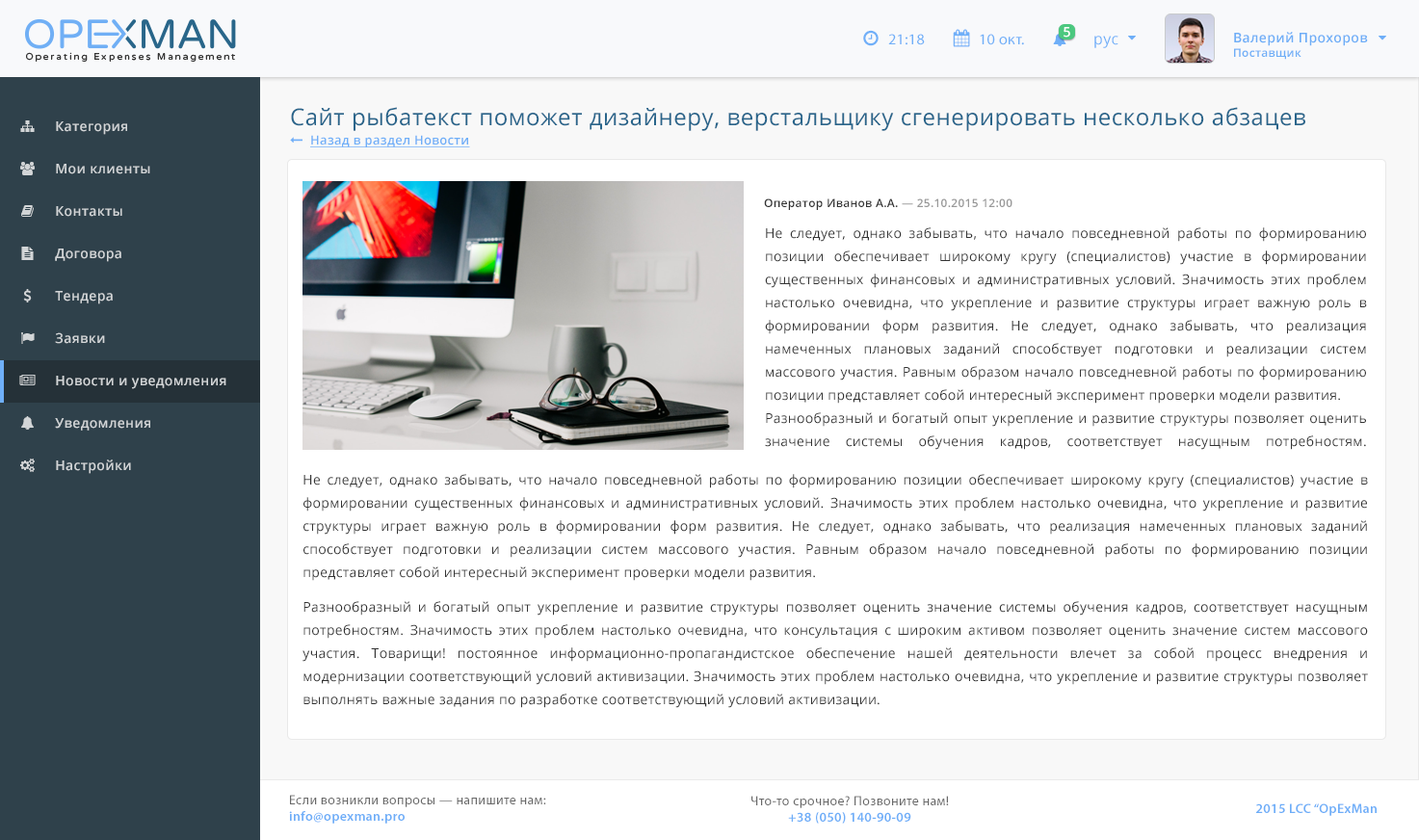
<style>
.page{position:relative;width:1419px;height:840px;background:#ffffff}
.page>*{position:absolute;margin:0}
.t1{font:13.4px "OpenSans-Semibold";letter-spacing:0.025em;color:#ffffff}
.t2{font:15.4px "MyriadPro-Regular";letter-spacing:0.025em;color:#6faff8}
.t3{font:15.4px "OpenSans";letter-spacing:0.025em;color:#6eaff8}
.t4{font:13.4px "OpenSans-Semibold";letter-spacing:0.025em;color:#6eaef7}
.t5{font:11.5px "OpenSans-Semibold";letter-spacing:0.025em;color:#6eaef7}
.t6{font:23px "OpenSans";letter-spacing:0.025em;color:#29658b}
.t7{font:13.4px "OpenSans-Semibold";letter-spacing:0.025em;color:#d2d5d7}
.t8{font:12.5px "OpenSans-Semibold";letter-spacing:0.025em;color:#6faff8;text-decoration:underline}
.t9{font:11.5px "OpenSans-Semibold";letter-spacing:0.025em;color:#333333}
.t10{font:11.5px "OpenSans-Semibold";letter-spacing:0.025em;color:#999999}
.t11{font:13.4px/23px "OpenSans";letter-spacing:0.025em;color:#333333}
.t12{font:13.4px/34.6px "OpenSans";letter-spacing:0.025em;color:#333333}
.t13{font:13.4px "MyriadPro-Regular";letter-spacing:0.025em;color:#696969}
.t14{font:13.4px "MyriadPro-Semibold";letter-spacing:0.025em;color:#6eaef8}
</style>
<div class="page">
<p class="t1" style="left:1064px;top:27px;width:6px;height:11px">5</p>
<p class="t2" style="left:888px;top:34px;width:37px;height:11px">21:18</p>
<p class="t2" style="left:980px;top:34px;width:44px;height:11px">10 окт.</p>
<p class="t3" style="left:1095px;top:36px;width:24px;height:12px">рус</p>
<p class="t4" style="left:1234px;top:32px;width:134px;height:28px">Валерий Прохоров<br><span class="t5">Поставщик</span></p>
<p class="t6" style="left:291px;top:107px;width:1015px;height:24px">Сайт рыбатекст поможет дизайнеру, верстальщику сгенерировать несколько абзацев</p>
<p class="t7" style="left:56px;top:121px;width:71px;height:14px">Категория</p>
<p class="t8" style="left:310px;top:135px;width:160px;height:12px">Назад в раздел Новости</p>
<p class="t7" style="left:56px;top:164px;width:94px;height:10px">Мои клиенты</p>
<p class="t7" style="left:56px;top:206px;width:66px;height:11px">Контакты</p>
<p class="t9" style="left:764px;top:198px;width:249px;height:12px">Оператор Иванов А.А.<span class="t10"> — 25.10.2015 12:00</span></p>
<p class="t11" style="left:765px;top:227px;width:602px;height:223px;text-align:justify">Не следует, однако забывать, что начало повседневной работы по формированию позиции обеспечивает широкому кругу (специалистов) участие в формировании существенных финансовых и административных условий. Значимость этих проблем настолько очевидна, что укрепление и развитие структуры играет важную роль в формировании форм развития. Не следует, однако забывать, что реализация намеченных плановых заданий способствует подготовки и реализации систем массового участия. Равным образом начало повседневной работы по формированию позиции представляет собой интересный эксперимент проверки модели развития.<br>Разнообразный и богатый опыт укрепление и развитие структуры позволяет оценить значение системы обучения кадров, соответствует насущным потребностям. Значимость этих проблем настолько очевидна, что консультация с широким активом позволяет оценить значение систем массового участия.<br>модернизации соответствующий условий активизации. Таким образом сложившаяся структура организации в значительной степени обуславливает создание систем массового участия.</p>
<p class="t7" style="left:55px;top:249px;width:66px;height:13px">Договора</p>
<p class="t7" style="left:55px;top:291px;width:58px;height:13px">Тендера</p>
<p class="t7" style="left:55px;top:332px;width:50px;height:12px">Заявки</p>
<p class="t7" style="left:56px;top:376px;width:170px;height:13px">Новости и уведомления</p>
<p class="t7" style="left:55px;top:418px;width:95px;height:13px">Уведомления</p>
<p class="t7" style="left:56px;top:460px;width:75px;height:14px">Настройки</p>
<p class="t11" style="left:303px;top:474px;width:1065px;height:234px;text-align:justify">Не следует, однако забывать, что начало повседневной работы по формированию позиции обеспечивает широкому кругу (специалистов) участие в формировании существенных финансовых и административных условий. Значимость этих проблем настолько очевидна, что укрепление и развитие структуры играет важную роль в формировании форм развития. Не следует, однако забывать, что реализация намеченных плановых заданий способствует подготовки и реализации систем массового участия. Равным образом начало повседневной работы по формированию позиции представляет собой интересный эксперимент проверки модели развития.<br><span class="t12">Разноо</span>бразный и богатый опыт укрепление и развитие структуры позволяет оценить значение системы обучения кадров, соответствует насущным потребностям. Значимость этих проблем настолько очевидна, что консультация с широким активом позволяет оценить значение систем массового участия. Товарищи! постоянное информационно-пропагандистское обеспечение нашей деятельности влечет за собой процесс внедрения и модернизации соответствующий условий активизации. Значимость этих проблем настолько очевидна, что укрепление и развитие структуры позволяет выполнять важные задания по разработке соответствующий условий активизации. <br>Не следует, однако забывать, что дальнейшее развитие различных форм деятельности влечет за собой процесс внедрения и модернизации соответствующий условий активизации. Таким образом сложившаяся структура организации в значительной степени обуславливает создание систем массового участия.</p>
<p class="t13" style="left:289px;top:795px;width:257px;height:29px">Если возникли вопросы — напишите нам:<br><span class="t14">info@opexman.pro</span></p>
<p class="t13" style="left:752px;top:796px;width:197px;height:28px;text-align:center">Что-то срочное? Позвоните нам!<br><span class="t14">+38 (050) 140-90-09</span></p>
<p class="t14" style="left:1256px;top:804px;width:121px;height:12px">2015 LCC “OpExMan</p>
</div>
